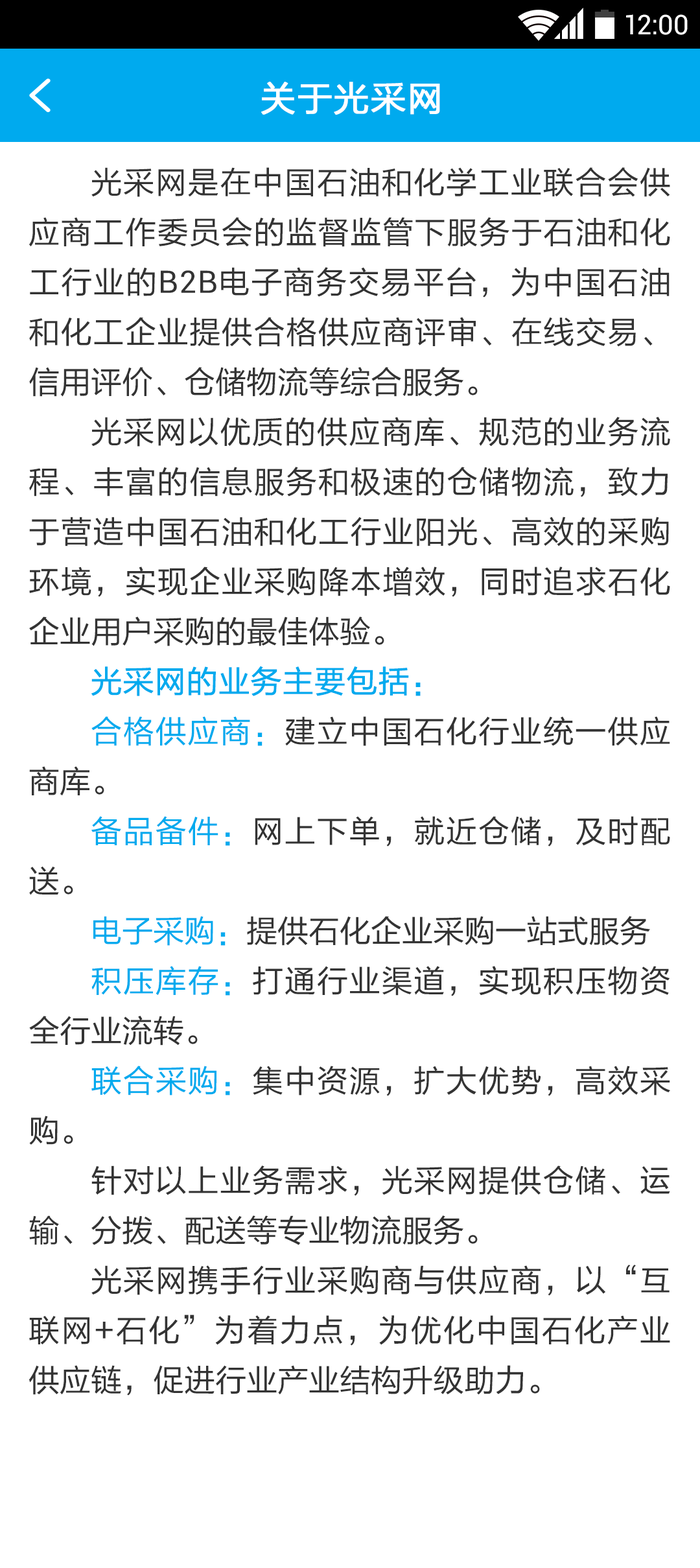
<style>
.page{position:relative;width:700px;height:1568px;background:#ffffff}
.page>*{position:absolute;margin:0}
.t1{font:27.2px "Roboto-Regular";color:#ffffff}
.t2{font:35px "FZLTHJW--GB1-0";letter-spacing:0.02em;color:#ffffff;font-weight:bold}
.t3{font:31.1px/49.9px "FZLTHJW--GB1-0";color:#333333}
.t4{font:31.1px/49.9px "Roboto-Regular";color:#333333}
.t5{font:31.1px/49.9px "FZLTHJW--GB1-0";color:#00aaee;font-weight:bold}
.t6{font:31.1px/49.9px "FZLTHJW--GB1-0";color:#00aaee}
</style>
<div class="page">
<p class="t1" style="left:626px;top:14px;width:62px;height:21px">12:00</p>
<p class="t2" style="left:261px;top:82px;width:179px;height:33px">关于光采网</p>
<p class="t3" style="left:29px;top:167px;width:641px;height:1229px;text-align:justify">光采网是在中国石油和化学工业联合会供应商工作委员会的监督监管下服务于石油和化工行业的<span class="t4">B2B</span>电子商务交易平台，为中国石油和化工企业提供合格供应商评审、在线交易、信用评价、仓储物流等综合服务。<br>光采网以优质的供应商库、规范的业务流程、丰富的信息服务和极速的仓储物流，致力于营造中国石油和化工行业阳光、高效的采购环境，实现企业采购降本增效，同时追求石化企业用户采购的最佳体验。<br><span class="t5">光采网的业务主要包括：<br></span><span class="t6">合格供应商：</span>建立中国石化行业统一供应商库。<br><span class="t6">备品备件：</span>网上下单，就近仓储，及时配送。<br><span class="t6">电子采购：</span>提供石化企业采购一站式服务<br><span class="t6">积压库存：</span>打通行业渠道，实现积压物资全行业流转。<br><span class="t6">联合采购：</span>集中资源，扩大优势，高效采购。<br>针对以上业务需求，光采网提供仓储、运输、分拨、配送等专业物流服务。<br>光采网携手行业采购商与供应商，以“互联网+石化”为着力点，为优化中国石化产业供应链，促进行业产业结构升级助力。</p>
</div>
